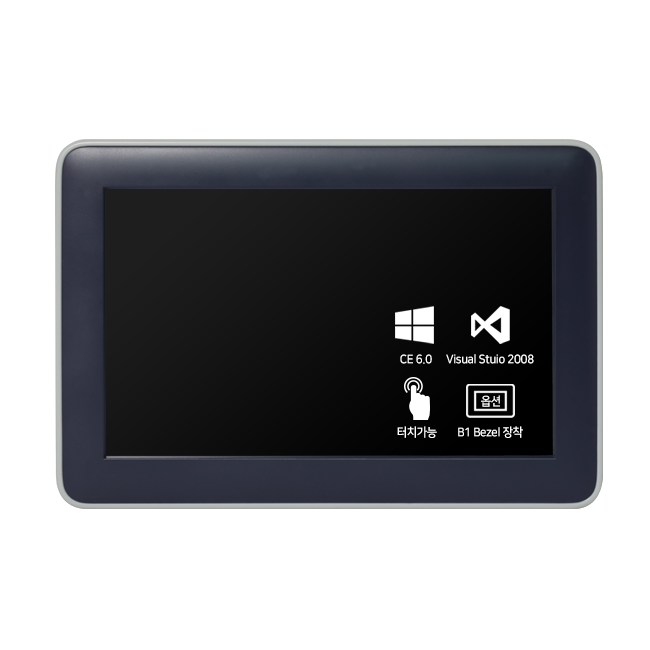
<style>
.page{position:relative;width:650px;height:650px;background:#ffffff}
.page>*{position:absolute;margin:0}
.t1{font:12px "NanumSquareB";letter-spacing:-0.03em;color:#ffffff;scale:0.95 1}
</style>
<div class="page">
<p class="t1" style="left:400px;top:354px;width:32px;height:10px">CE 6.0</p>
<p class="t1" style="left:446px;top:354px;width:88px;height:10px">Visual Stuio 2008</p>
<p class="t1" style="left:481px;top:395px;width:19px;height:12px">옵션</p>
<p class="t1" style="left:397px;top:426px;width:40px;height:12px">터치가능</p>
<p class="t1" style="left:458px;top:426px;width:65px;height:12px">B1 Bezel 장착</p>
</div>
